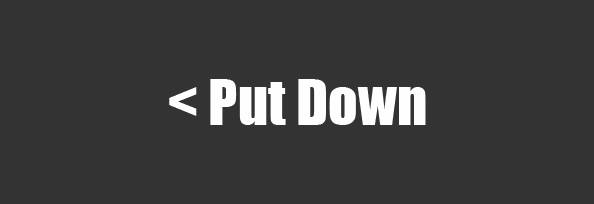
<style>
.page{position:relative;width:594px;height:204px;background:#333333}
.page>*{position:absolute;margin:0}
.t1{font:58.3px "Impact";color:#fffefe}
</style>
<div class="page">
<p class="t1" style="left:169px;top:79px;width:257px;height:46px">&lt; Put Down</p>
</div>
